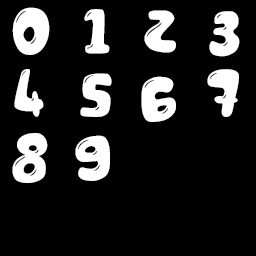
<style>
.page{position:relative;width:256px;height:256px;background:#000000}
.page>*{position:absolute;margin:0}
.t1{font:71px "ChocolateBarDemo";color:#fefefe}
.t2{font:71px "ChocolateBarDemo";color:#ffffff}
</style>
<div class="page">
<p class="t1" style="left:12px;top:7px;width:38px;height:48px">0</p>
<p class="t2" style="left:84px;top:9px;width:26px;height:45px">1</p>
<p class="t2" style="left:144px;top:10px;width:32px;height:43px">2</p>
<p class="t2" style="left:209px;top:11px;width:31px;height:46px">3</p>
<p class="t2" style="left:14px;top:69px;width:30px;height:48px">4</p>
<p class="t2" style="left:80px;top:73px;width:32px;height:44px">5</p>
<p class="t2" style="left:141px;top:76px;width:35px;height:46px">6</p>
<p class="t2" style="left:207px;top:69px;width:32px;height:48px">7</p>
<p class="t2" style="left:12px;top:133px;width:36px;height:50px">8</p>
<p class="t2" style="left:75px;top:135px;width:35px;height:46px">9</p>
</div>
